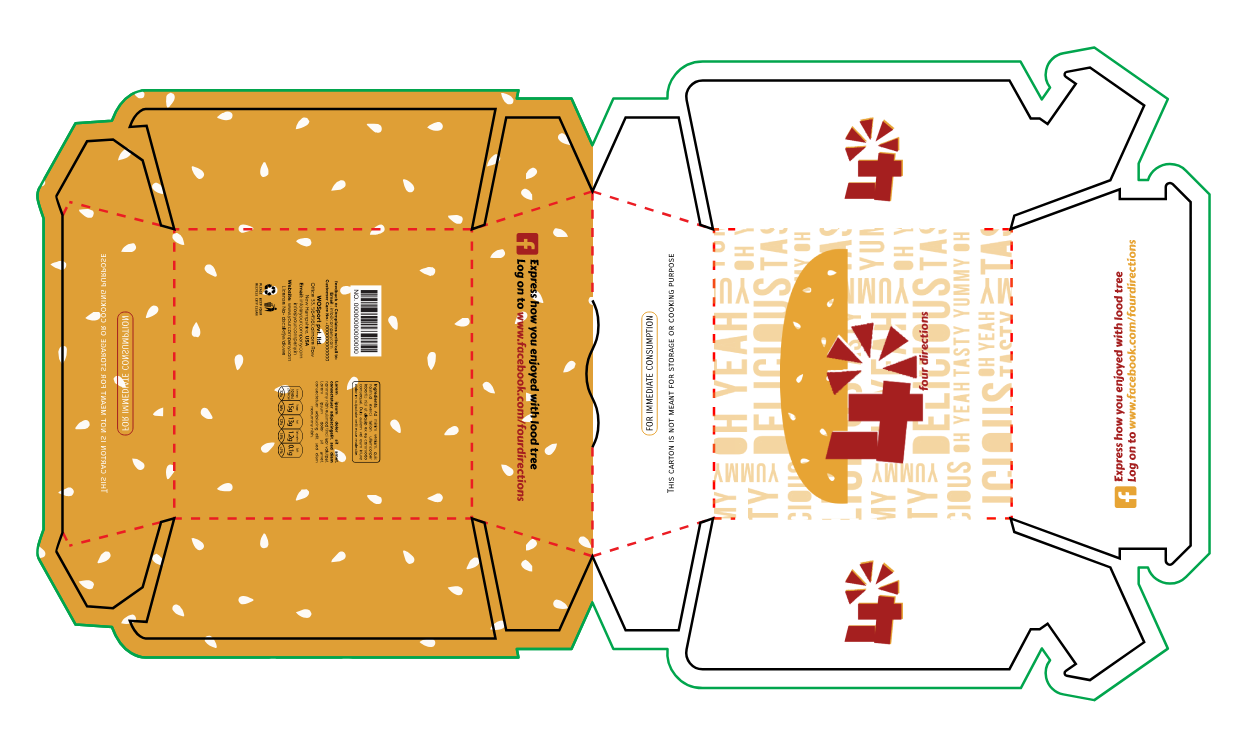
<style>
.page{position:relative;width:1248px;height:732px;background:#ffffff}
.page>*{position:absolute;margin:0}
.t1{font:11px "CarterOne";color:#a51f1f}
.t2{font:11px "CarterOne";color:#e7a434}
.t3{font:8.8px "CarroisGothicSC-Regular";color:#ffffff}
.t4{font:8.8px "CarroisGothicSC-Regular";color:#000000}
.t5{font:11px "CarterOne";color:#000000}
</style>
<div class="page">
<p class="t1" style="left:1113px;top:239px;width:26px;height:243px;rotate:-90deg">Express how you enjoyed with lood tree<br>Log on to <span class="t2">www.facebook.com/</span><span class="t2">four</span><span class="t2">directions</span></p>
<p class="t3" style="left:100px;top:254px;width:29px;height:239px;text-align:center;rotate:-90deg">FOR IMMEDIATE CONSUMPTION<br><br>This carton is not meant for storage or cooking purpose</p>
<p class="t4" style="left:646px;top:254px;width:28px;height:239px;text-align:center;rotate:-90deg">FOR IMMEDIATE CONSUMPTION<br><br>This carton is not meant for storage or cooking purpose</p>
<p class="t5" style="left:514px;top:259px;width:26px;height:243px;rotate:90deg">Express how you enjoyed with lood tree<br>Log on to <span class="t1">www.facebook.com/four</span><span class="t1">directions</span></p>
</div>
